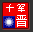
<style>
.page{position:relative;width:33px;height:32px;background:#f20000}
.page>*{position:absolute;margin:0}
.t1{font:10.4px "SimSun";color:#ffffff}
.t2{font:11.7px "SimSun";color:#ffffff}
</style>
<div class="page">
<p class="t1" style="left:6px;top:4px;width:19px;height:8px">十军</p>
<p class="t2" style="left:16px;top:15px;width:11px;height:12px">晋</p>
</div>
